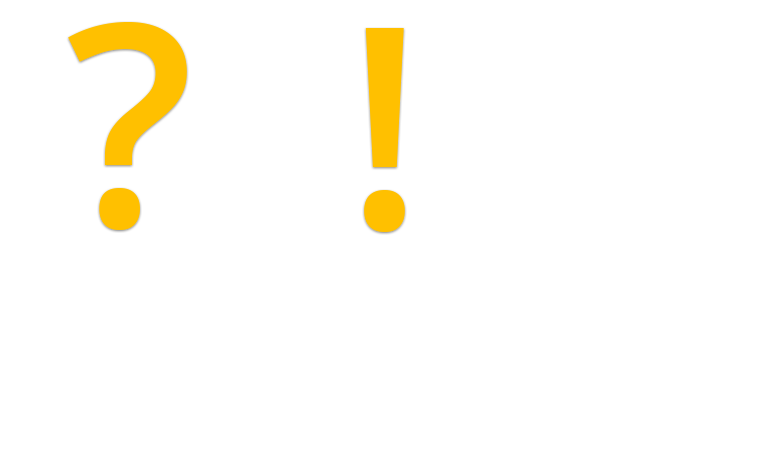
<style>
.page{position:relative;width:763px;height:450px;background:#ffffff}
.page>*{position:absolute;margin:0}
.t1{font:282px "OpenSans-Semibold";color:#ffc000}
.t2{font:280px "OpenSans-Semibold";color:#ffc000}
</style>
<div class="page">
<p class="t1" style="left:68px;top:22px;width:119px;height:208px">?</p>
<p class="t2" style="left:364px;top:28px;width:41px;height:204px">!</p>
</div>
